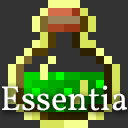
<style>
.page{position:relative;width:128px;height:128px;background:#333333}
.page>*{position:absolute;margin:0}
.t1{font:34.8px "Vollkorn-Regular";color:#ffffff}
</style>
<div class="page">
<p class="t1" style="left:2px;top:85px;width:125px;height:26px">Essentia</p>
</div>
